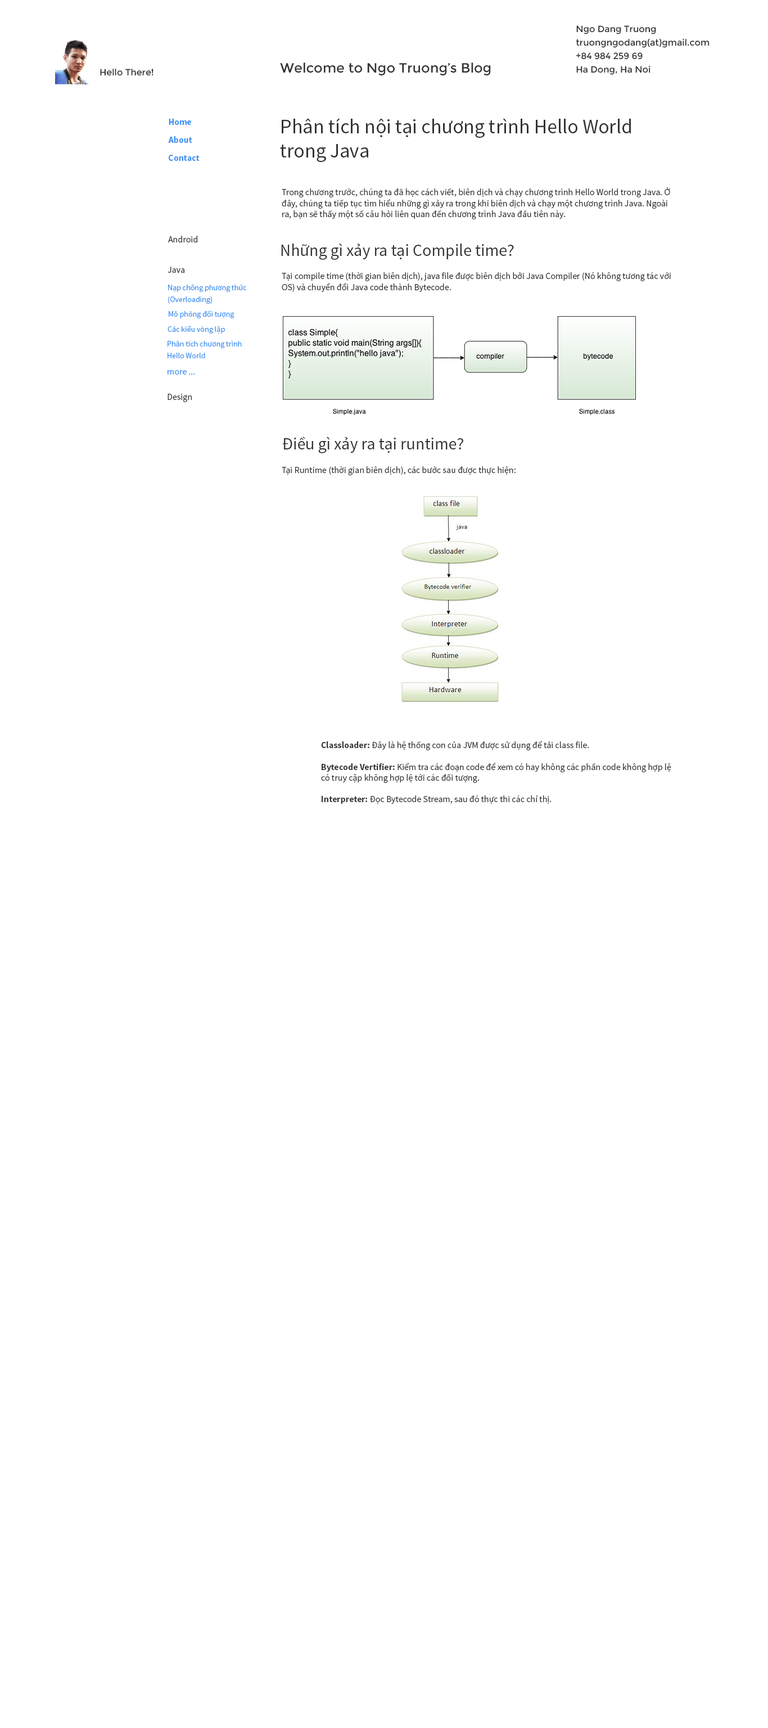
<style>
.page{position:relative;width:768px;height:1728px;background:#ffffff}
.page>*{position:absolute;margin:0}
.t1{font:9px/13.5px "Montserrat-Regular";color:#333333}
.t2{font:13.5px "Montserrat-Regular";color:#333333}
.t3{font:9px "Montserrat-Regular";color:#333333}
.t4{font:9px/18px "SourceSansPro-Bold";color:#368ff2}
.t5{font:20.2px "SourceSansPro-Regular";color:#333333}
.t6{font:9px "SourceSansPro-Regular";color:#333333}
.t7{font:16.9px "SourceSansPro-Regular";color:#333333}
.t8{font:7.9px/11.8px "SourceSansPro-Regular";color:#368ff2}
.t9{font:7.9px "SourceSansPro-Regular";color:#368ff2}
.t10{font:9px "SourceSansPro-Regular";color:#368ff2}
.t11{font:9px "SourceSansPro-Bold";color:#333333}
</style>
<div class="page">
<p class="t1" style="left:576px;top:25px;width:134px;height:50px">Ngo Dang Truong<br>truongngodang(at)gmail.com<br>+84 984 259 69<br>Ha Dong, Ha Noi</p>
<p class="t2" style="left:280px;top:62px;width:211px;height:14px">Welcome to Ngo Truong’s Blog</p>
<p class="t3" style="left:100px;top:69px;width:54px;height:7px">Hello There!</p>
<p class="t4" style="left:168px;top:119px;width:32px;height:42px">Home<br>About<br>Contact</p>
<p class="t5" style="left:280px;top:119px;width:351px;height:43px">Phân tích nội tại chương trình Hello World <br>trong Java</p>
<p class="t6" style="left:282px;top:187px;width:388px;height:32px">Trong chương trước, chúng ta đã học cách viết, biên dịch và chạy chương trình Hello World trong Java. Ở đây, chúng ta tiếp tục tìm hiểu những gì xảy ra trong khi biên dịch và chạy một chương trình Java. Ngoài ra, bạn sẽ thấy một số câu hỏi liên quan đến chương trình Java đầu tiên này.</p>
<p class="t6" style="left:168px;top:236px;width:29px;height:6px">Android</p>
<p class="t7" style="left:281px;top:244px;width:233px;height:16px">Những gì xảy ra tại Compile time?</p>
<p class="t6" style="left:168px;top:267px;width:16px;height:6px">Java</p>
<p class="t6" style="left:282px;top:272px;width:389px;height:20px">Tại compile time (thời gian biên dịch), java file được biên dịch bởi Java Compiler (Nó không tương tác với OS) và chuyển đổi Java code thành Bytecode.</p>
<p class="t8" style="left:168px;top:284px;width:79px;height:20px">Nạp chồng phương thức <br>(Overloading)</p>
<p class="t9" style="left:169px;top:310px;width:66px;height:8px">Mô phỏng đối tượng</p>
<p class="t9" style="left:168px;top:326px;width:57px;height:8px">Các kiểu vòng lặp</p>
<p class="t8" style="left:168px;top:341px;width:74px;height:17px">Phân tích chương trình <br>Hello World</p>
<p class="t10" style="left:168px;top:370px;width:27px;height:5px">more ...</p>
<p class="t6" style="left:168px;top:394px;width:24px;height:8px">Design</p>
<p class="t7" style="left:282px;top:436px;width:182px;height:17px">Điều gì xảy ra tại runtime?</p>
<p class="t6" style="left:282px;top:466px;width:234px;height:9px">Tại Runtime (thời gian biên dịch), các bước sau được thực hiện:</p>
<p class="t6" style="left:321px;top:741px;width:351px;height:63px"><span class="t11">Classloader:</span> Đây là hệ thống con của JVM được sử dụng để tải class file.<br><span class="t11"><br>Bytecode Vertifier:</span> Kiểm tra các đoạn code để xem có hay không các phần code không hợp lệ có truy cập không hợp lệ tới các đối tượng.<br><span class="t11"><br>Interpreter: </span>Đọc Bytecode Stream, sau đó thực thi các chỉ thị.</p>
</div>
